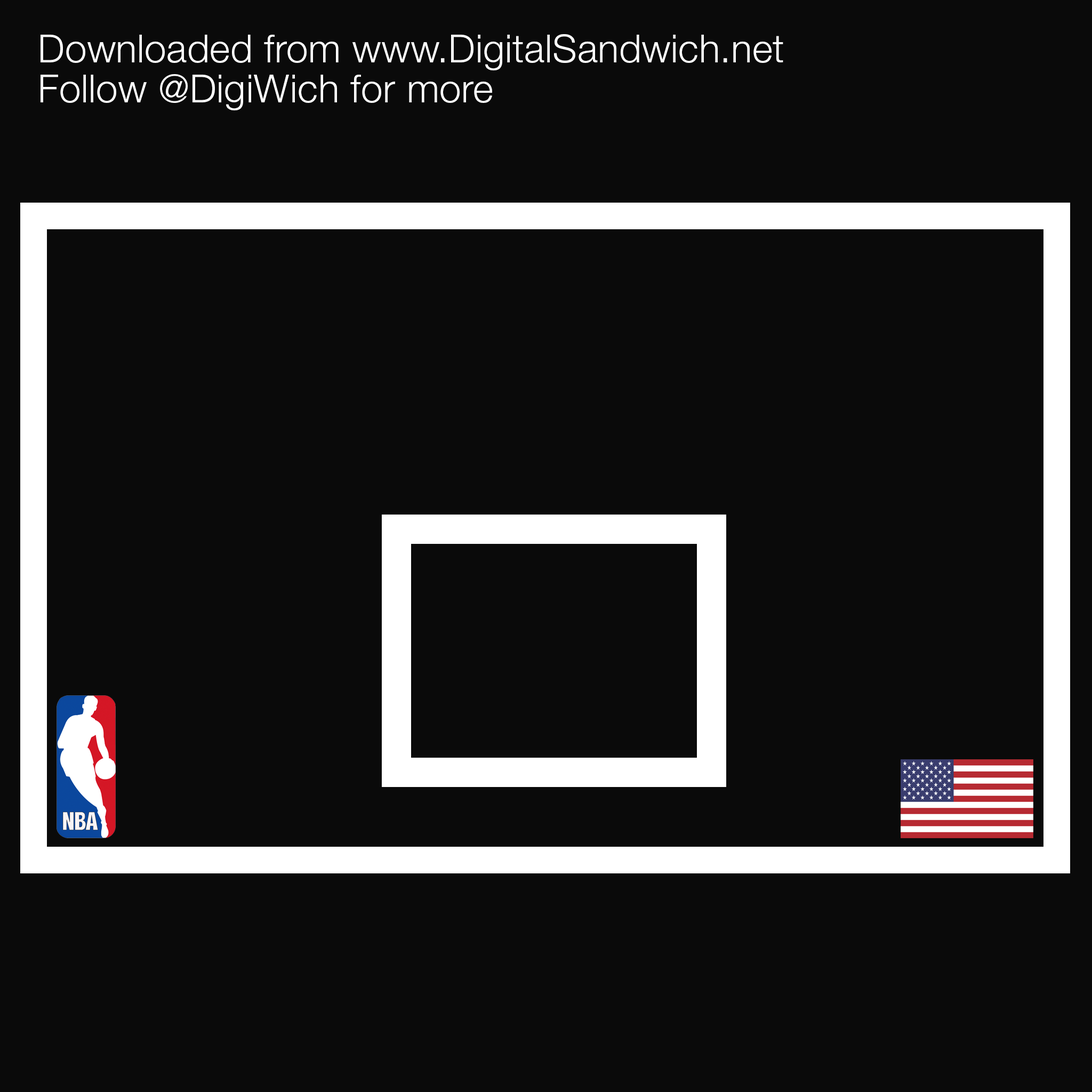
<style>
.page{position:relative;width:1092px;height:1092px;background:#0a0a0a}
.page>*{position:absolute;margin:0}
.t1{font:38.9px/40px "HelveticaNeueLTStd-Lt";letter-spacing:0.008em;color:#ffffff}
</style>
<div class="page">
<p class="t1" style="left:41px;top:34px;width:742px;height:76px">Downloaded from www.DigitalSandwich.net<br>Follow @DigiWich for more</p>
</div>
